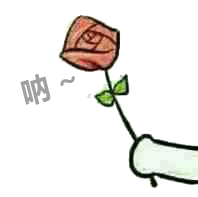
<style>
.page{position:relative;width:198px;height:197px;background:#ffffff}
.page>*{position:absolute;margin:0}
.t1{font:30.1px "MicrosoftYaHei-Bold";letter-spacing:-0.01em;color:#a1a0a0;scale:0.95 1}
</style>
<div class="page">
<p class="t1" style="left:20px;top:73px;width:55px;height:32px;rotate:-18deg">呐 ~</p>
</div>
